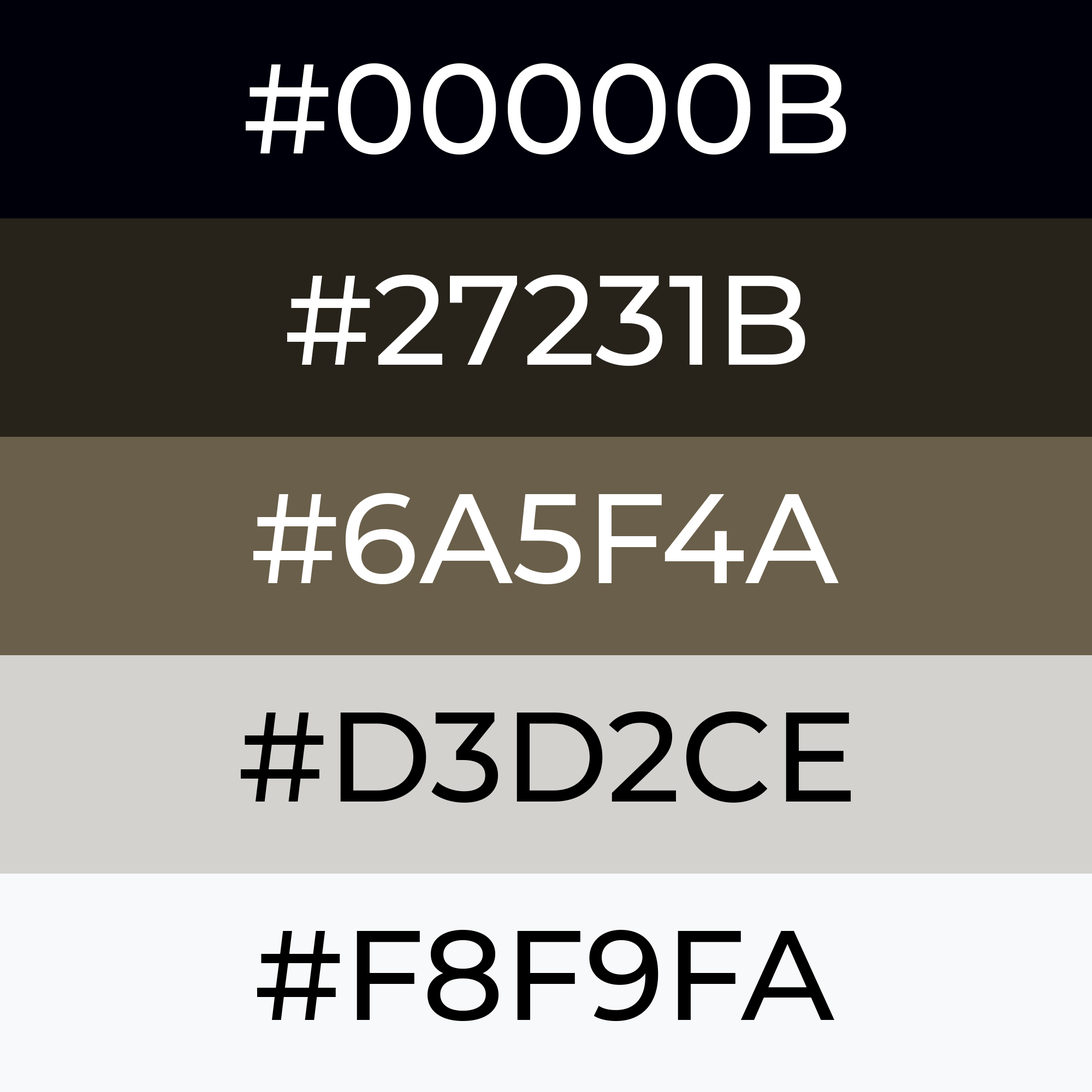
<style>
.page{position:relative;width:1092px;height:1092px}
.page>*{position:absolute;margin:0}
.t1{font:127.2px "Montserrat-Medium";color:#ffffff}
.t2{font:127.2px "Montserrat-Medium";color:#000000}
</style>
<div class="page">
<p class="t1" style="left:246px;top:63px;width:600px;height:92px">#00000B</p>
<p class="t1" style="left:287px;top:275px;width:518px;height:91px">#27231B</p>
<p class="t1" style="left:253px;top:493px;width:586px;height:91px">#6A5F4A</p>
<p class="t2" style="left:241px;top:711px;width:610px;height:92px">#D3D2CE</p>
<p class="t2" style="left:257px;top:930px;width:577px;height:91px">#F8F9FA</p>
</div>
